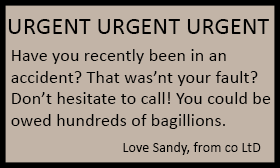
<style>
.page{position:relative;width:280px;height:168px;background:#c2b4a7}
.page>*{position:absolute;margin:0}
.t1{font:24px "Calibri";letter-spacing:0.01em;color:#000000}
.t2{font:18px "Calibri";letter-spacing:0.01em;color:#000000}
.t3{font:14px "Calibri";letter-spacing:0.01em;color:#000000}
</style>
<div class="page">
<p class="t1" style="left:8px;top:19px;width:261px;height:15px">URGENT URGENT URGENT</p>
<p class="t2" style="left:11px;top:49px;width:260px;height:80px">Have you recently been in an <br>accident? That was’nt your fault?<br>Don’t hesitate to call! You could be<br>owed hundreds of bagillions.</p>
<p class="t3" style="left:123px;top:142px;width:138px;height:13px">Love Sandy, from co LtD</p>
</div>
